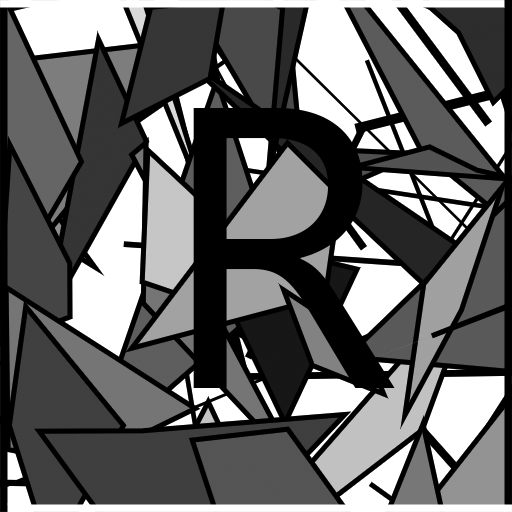
<style>
.page{position:relative;width:512px;height:512px;background:#000000}
.page>*{position:absolute;margin:0}
.t1{font:400px "Gadugi";color:#000000}
</style>
<div class="page">
<p class="t1" style="left:193px;top:108px;width:202px;height:280px">R</p>
</div>
